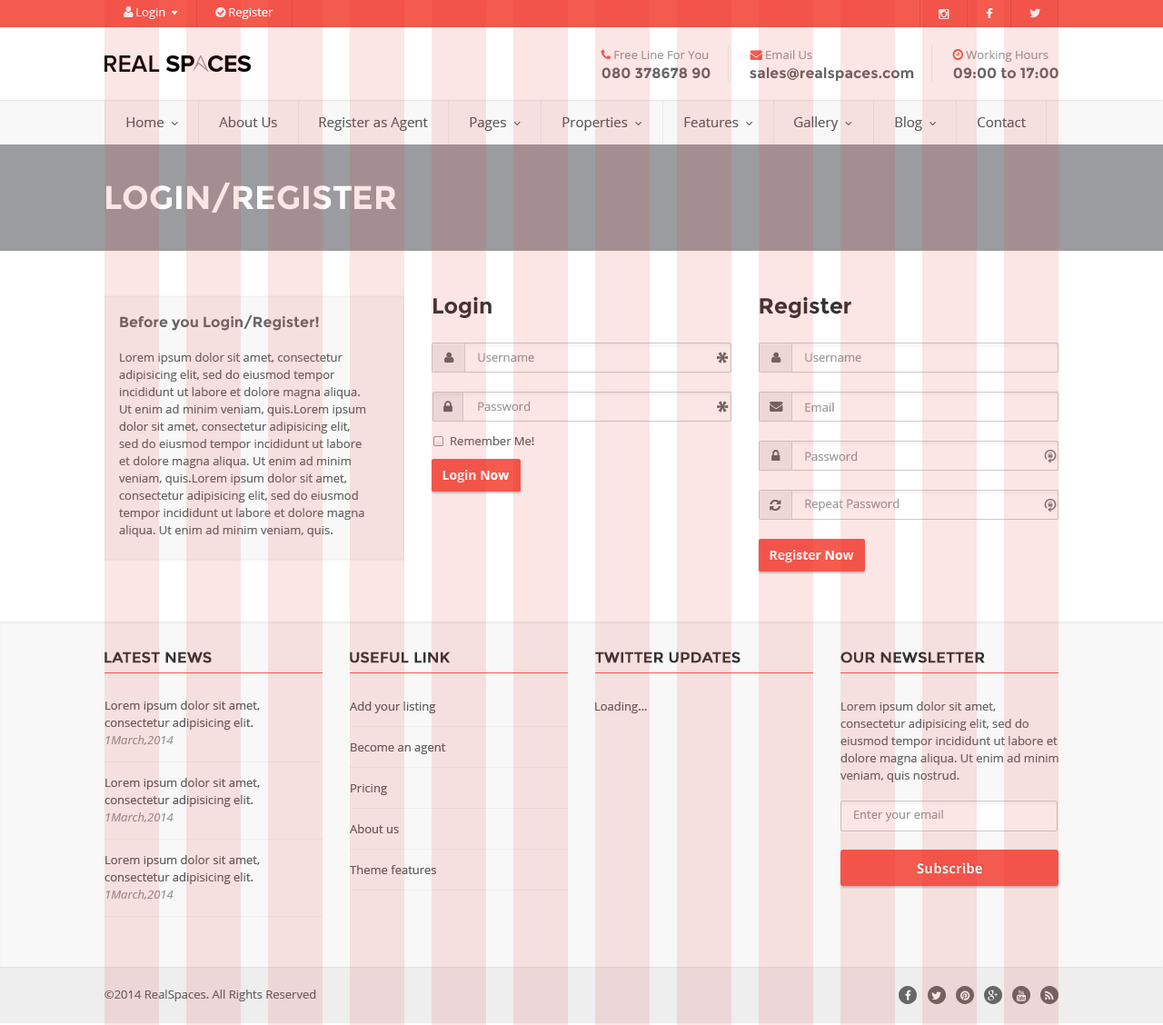
<style>
.page{position:relative;width:1163px;height:1025px}
.page>*{position:absolute;margin:0}
.t1{font:14.5px "Montserrat-Bold";color:#666666}
.t2{font:13.6px "OpenSans";color:#5e5e5e}
.t3{font:32.7px "Montserrat-Bold";color:#fce5e5}
.t4{font:21.8px "Montserrat-Bold";color:#333333}
.t5{font:11.8px/17.3px "OpenSans";color:#666666}
.t6{font:11.8px "OpenSans";color:#999999}
.t7{font:27.1px "MyriadPro-Bold";color:#666666}
.t8{font:11.8px "OpenSans";color:#666666}
.t9{font:12.7px "OpenSans-Bold"}
.t10{font:12.7px "OpenSans-Bold";color:#fce5e5}
.t11{font:14.5px "Montserrat-Regular";color:#333333;font-weight:bold}
.t12{font:11.8px/17.3px "OpenSans";color:#5e5e5e}
.t13{font:11.8px/17.3px "OpenSans-Italic";color:#999999}
.t14{font:11.8px/40.9px "OpenSans";color:#5e5e5e}
.t15{font:11.8px "OpenSans";color:#5e5e5e}
.t16{font:13.6px "OpenSans-Bold";color:#fce5e5}
</style>
<div class="page">
<p class="t1" style="left:602px;top:67px;width:109px;height:12px">080 378678 90</p>
<p class="t1" style="left:750px;top:67px;width:164px;height:14px">sales@realspaces.com</p>
<p class="t1" style="left:953px;top:67px;width:106px;height:12px">09:00 to 17:00</p>
<p class="t2" style="left:219px;top:116px;width:58px;height:11px">About Us</p>
<p class="t2" style="left:319px;top:117px;width:109px;height:14px">Register as Agent</p>
<p class="t2" style="left:978px;top:117px;width:48px;height:10px">Contact</p>
<p class="t3" style="left:106px;top:183px;width:290px;height:30px">LOGIN/REGISTER</p>
<p class="t4" style="left:433px;top:296px;width:59px;height:22px">Login</p>
<p class="t4" style="left:760px;top:296px;width:92px;height:22px">Register</p>
<p class="t1" style="left:120px;top:315px;width:199px;height:16px">Before you Login/Register!</p>
<p class="t5" style="left:119px;top:353px;width:247px;height:184px">Lorem ipsum dolor sit amet, consectetur adipisicing elit, sed do eiusmod tempor incididunt ut labore et dolore magna aliqua. Ut enim ad minim veniam, quis.Lorem ipsum dolor sit amet, consectetur adipisicing elit, sed do eiusmod tempor incididunt ut labore et dolore magna aliqua. Ut enim ad minim veniam, quis.Lorem ipsum dolor sit amet, consectetur adipisicing elit, sed do eiusmod tempor incididunt ut labore et dolore magna aliqua. Ut enim ad minim veniam, quis.</p>
<p class="t6" style="left:478px;top:353px;width:56px;height:10px">Username</p>
<p class="t7" style="left:717px;top:352px;width:11px;height:12px">*</p>
<p class="t6" style="left:805px;top:353px;width:57px;height:10px">Username</p>
<p class="t6" style="left:478px;top:401px;width:53px;height:11px">Password</p>
<p class="t7" style="left:717px;top:401px;width:12px;height:12px">*</p>
<p class="t6" style="left:805px;top:402px;width:29px;height:11px">Email</p>
<p class="t8" style="left:451px;top:436px;width:83px;height:9px">Remember Me!</p>
<p class="t6" style="left:805px;top:451px;width:53px;height:11px">Password</p>
<p class="t9" style="left:443px;top:470px;width:66px;height:13px">Login Now</p>
<p class="t6" style="left:805px;top:498px;width:95px;height:14px">Repeat Password</p>
<p class="t10" style="left:770px;top:550px;width:84px;height:13px">Register Now</p>
<p class="t11" style="left:105px;top:652px;width:107px;height:11px">LATEST NEWS</p>
<p class="t11" style="left:350px;top:652px;width:100px;height:11px">USEFUL LINK</p>
<p class="t11" style="left:595px;top:652px;width:146px;height:11px">TWITTER UPDATES</p>
<p class="t11" style="left:841px;top:652px;width:144px;height:11px">OUR NEWSLETTER</p>
<p class="t12" style="left:105px;top:701px;width:155px;height:44px">Lorem ipsum dolor sit amet, consectetur adipisicing elit.<br><span class="t13">1March,2014</span></p>
<p class="t14" style="left:350px;top:702px;width:96px;height:172px">Add your listing<br>Become an agent<br>Pricing<br>About us<br>Theme features</p>
<p class="t15" style="left:595px;top:702px;width:52px;height:11px">Loading...</p>
<p class="t5" style="left:841px;top:702px;width:218px;height:80px">Lorem ipsum dolor sit amet, consectetur adipisicing elit, sed do eiusmod tempor incididunt ut labore et dolore magna aliqua. Ut enim ad minim veniam, quis nostrud.</p>
<p class="t12" style="left:105px;top:778px;width:155px;height:44px">Lorem ipsum dolor sit amet, consectetur adipisicing elit.<br><span class="t13">1March,2014</span></p>
<p class="t6" style="left:854px;top:810px;width:89px;height:12px">Enter your email</p>
<p class="t12" style="left:105px;top:855px;width:155px;height:45px">Lorem ipsum dolor sit amet, consectetur adipisicing elit.<br><span class="t13">1March,2014</span></p>
<p class="t16" style="left:917px;top:862px;width:65px;height:12px">Subscribe</p>
<p class="t8" style="left:105px;top:990px;width:211px;height:11px">©2014 RealSpaces. All Rights Reserved</p>
</div>
